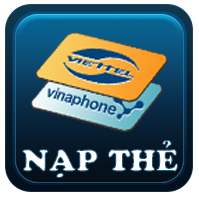
<style>
.page{position:relative;width:199px;height:198px}
.page>*{position:absolute;margin:0}
.t1{font:32px "UTM-Cooper-Black"}
</style>
<div class="page">
<p class="t1" style="left:22px;top:140px;width:156px;height:38px">NẠP THẺ</p>
</div>
